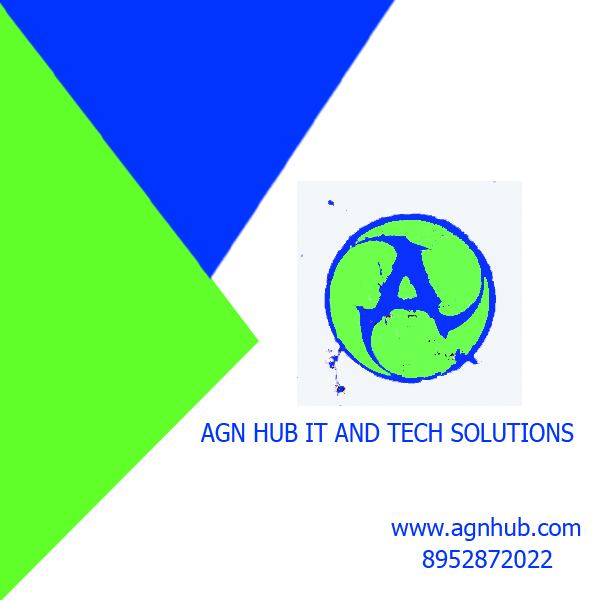
<style>
.page{position:relative;width:600px;height:600px;background:#ffffff}
.page>*{position:absolute;margin:0}
.t1{font:25px "Tahoma";color:#0134ff;scale:0.93 1}
.t2{font:24px "Tahoma";color:#0134ff}
</style>
<div class="page">
<p class="t1" style="left:201px;top:423px;width:373px;height:19px">AGN HUB IT AND TECH SOLUTIONS</p>
<p class="t2" style="left:391px;top:517px;width:190px;height:24px">www.agnhub.com</p>
<p class="t2" style="left:422px;top:550px;width:131px;height:18px">8952872022</p>
</div>
